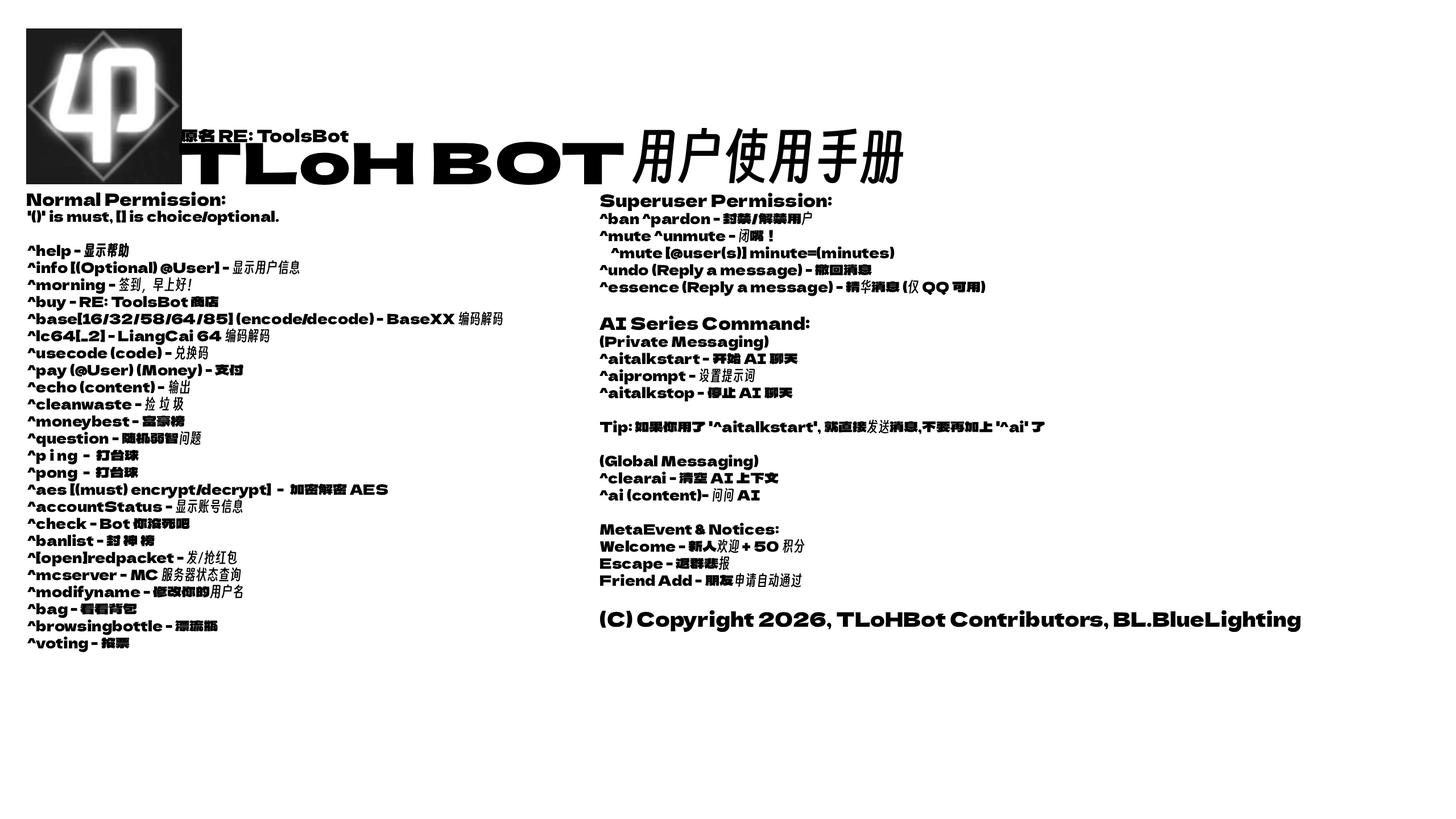
<style>
.page{position:relative;width:1456px;height:819px;background:#ffffff}
.page>*{position:absolute;margin:0}
.t1{font:17.1px "DelaGothicOne-Regular";color:#000000}
.t2{font:56.9px "SmileySans-Oblique";color:#000000}
.t3{font:56.9px "DelaGothicOne-Regular";color:#000000;scale:1.25 1}
.t4{font:14.2px "DelaGothicOne-Regular";color:#000000}
.t5{font:14.2px "SmileySans-Oblique";color:#000000}
.t6{font:19.9px "DelaGothicOne-Regular";color:#000000}
</style>
<div class="page">
<p class="t1" style="left:181px;top:129px;width:168px;height:14px">原名 RE: ToolsBot</p>
<p class="t2" style="left:632px;top:128px;width:272px;height:56px">用户使用手册</p>
<p class="t3" style="left:179px;top:142px;width:445px;height:43px">TLoH BOT</p>
<p class="t1" style="left:27px;top:192px;width:199px;height:14px">Normal Permission:</p>
<p class="t4" style="left:599px;top:193px;width:702px;height:439px"><span class="t1">Superuser Permission:<br></span>^ban ^pardon - 封禁/解禁用<span class="t5">户<br></span>^mute ^unmute - <span class="t5">闭</span>嘴！<br>    ^mute [@user(s)] minute=(minutes)<br>^undo (Reply a message) - 撤回消息<br>^essence (Reply a message) - 精<span class="t5">华</span>消息 (<span class="t5">仅 </span>QQ 可用)<br><br><span class="t1">AI Series Command:<br></span>(Private Messaging)<br>^aitalkstart - 开始 AI 聊天<br>^aiprompt - <span class="t5">设置提示词<br></span>^aitalkstop - 停止 AI 聊天<br><br>Tip: 如果你用了 '^aitalkstart', 就直接<span class="t5">发送</span>消息，不要再加上 '^ai' 了<br><br>(Global Messaging)<br>^clearai - 清空 AI 上下文<br>^ai (content)- <span class="t5">问问 </span>AI<br><br>MetaEvent &amp; Notices:<br>Welcome - 新人<span class="t5">欢迎 </span>+ 50 <span class="t5">积分<br></span>Escape - 退群悲<span class="t5">报</span><br>Friend Add - 朋友<span class="t5">申请自动通过<br><br></span><span class="t6">(C) Copyright 2026, TLoHBot Contributors, BL.BlueLighting</span></p>
<p class="t4" style="left:27px;top:209px;width:476px;height:444px">'()' is must, [] is choice/optional.<br><br>^help - <span class="t5">显示帮助<br></span>^info [(Optional) @User] - <span class="t5">显示用户信息<br></span>^morning - <span class="t5">签到，早上好！<br></span>^buy - RE: ToolsBot 商店<br>^base[16/32/58/64/85] (encode/decode) - BaseXX <span class="t5">编码解码<br></span>^lc64[_2] - LiangCai 64 <span class="t5">编码解码<br></span>^usecode (code) - <span class="t5">兑换码<br></span>^pay (@User) (Money) - 支付<br>^echo (content) - <span class="t5">输出<br></span>^cleanwaste - <span class="t5">捡 垃 圾<br></span>^moneybest - 富豪榜<br>^question - 随机弱智<span class="t5">问题<br></span>^p i ng  -  打台球<br>^pong  -  打台球<br>^aes [(must) encrypt/decrypt]  -  加密解密 AES<br>^accountStatus - <span class="t5">显示账号信息<br></span>^check - Bot 你没死吧<br>^banlist - 封 神 榜<br>^[open]redpacket - <span class="t5">发/抢红包<br></span>^mcserver - MC <span class="t5">服务器状态查询<br></span>^modifyname - 修改你的<span class="t5">用户名<br></span>^bag - 看看背包<br>^browsingbottle - 漂流瓶<br>^voting - 投票</p>
</div>
